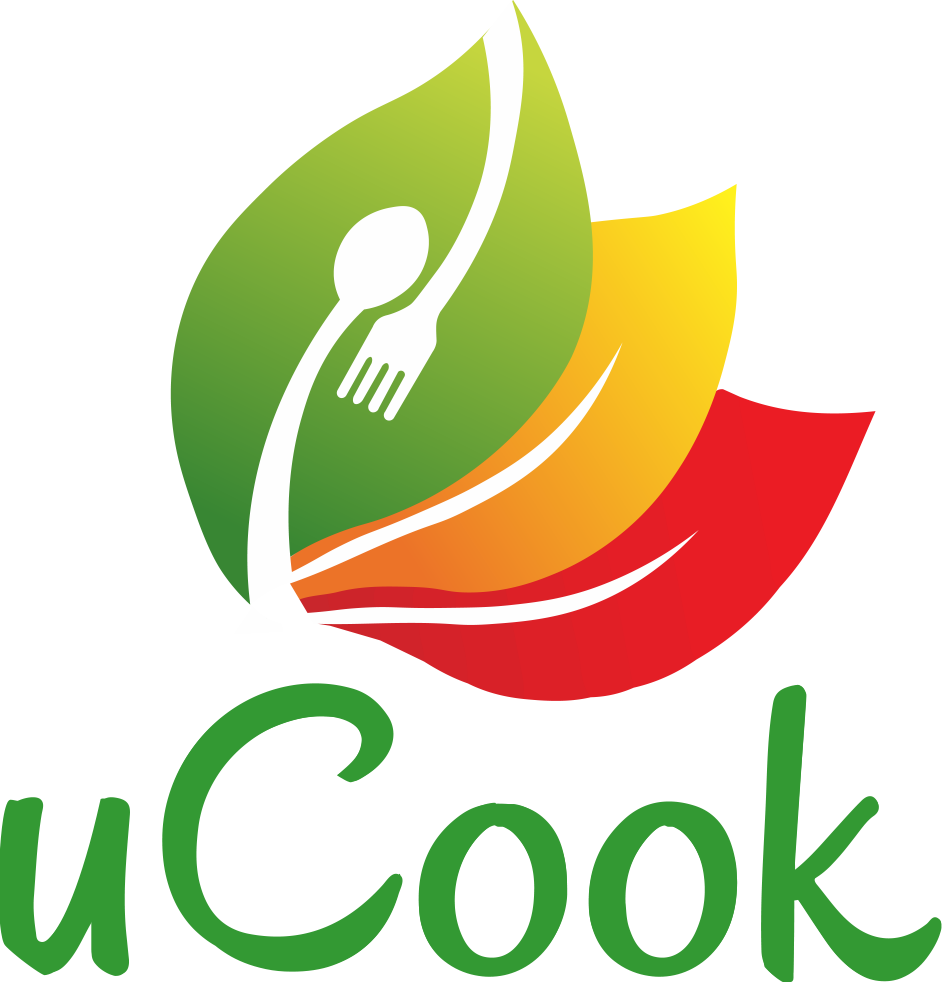
<style>
.page{position:relative;width:942px;height:982px;background:#ffffff}
.page>*{position:absolute;margin:0}
.t1{font:417.6px "Oregano-Regular";color:#339933}
</style>
<div class="page">
<p class="t1" style="left:0px;top:684px;width:942px;height:299px">uCook</p>
</div>
